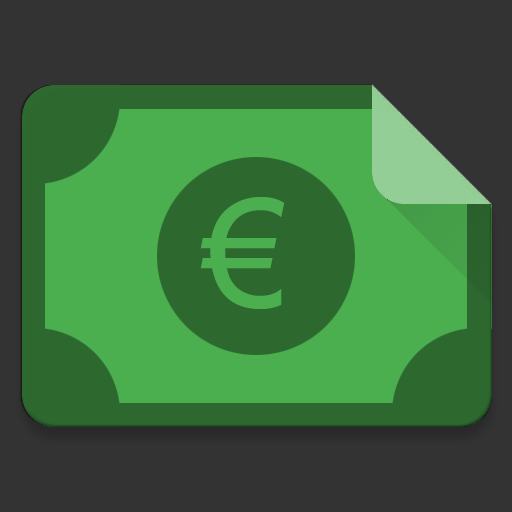
<style>
.page{position:relative;width:512px;height:512px;background:#333333}
.page>*{position:absolute;margin:0}
.t1{font:150px "ArialMT";color:#4bae4f}
</style>
<div class="page">
<p class="t1" style="left:200px;top:197px;width:85px;height:112px">€</p>
</div>
